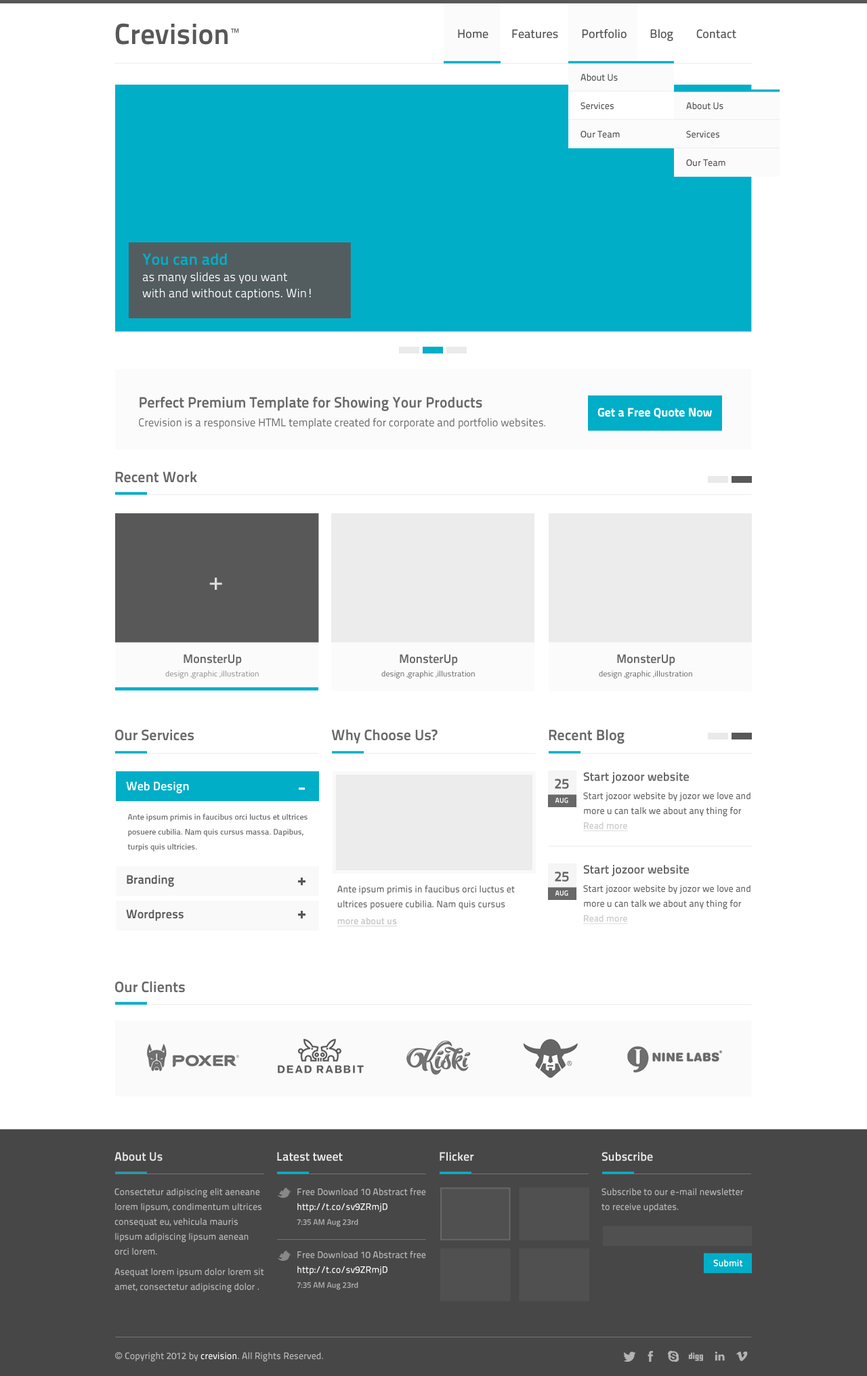
<style>
.page{position:relative;width:867px;height:1376px;background:#ffffff}
.page>*{position:absolute;margin:0}
.t1{font:12.2px "TitilliumText22L-Medium";color:#585858}
.t2{font:9.5px "TitilliumText22L-Medium";color:#585858}
.t3{font:12.2px/16.3px "TitilliumText22L-Regular";color:#ffffff}
.t4{font:16.3px/16.3px "TitilliumText22L-Bold";color:#00aec8}
.t5{font:11.3px/18.8px "TitilliumText22L-Regular";color:#686868}
.t6{font:15px/25.2px "TitilliumText22L-Bold";color:#686868}
.t7{font:12.2px "TitilliumText22L-XBold";color:#ffffff}
.t8{font:14.9px "TitilliumText22L-Bold";color:#686868}
.t9{font:24.4px "TitilliumText22L-Medium";color:#dedede}
.t10{font:12.2px "TitilliumText22L-Bold";color:#686868}
.t11{font:8.1px "TitilliumText22L-Regular";color:#8f8f8f}
.t12{font:8.1px "TitilliumText22L-Regular";color:#686868}
.t13{font:12.2px "TitilliumText22L-Bold";color:#ffffff}
.t14{font:9.5px/14.9px "TitilliumText22L-Medium";color:#686868}
.t15{font:9.5px/14.9px "TitilliumText22L-Bold";color:#cfcfcf;text-decoration:underline}
.t16{font:8.1px/14.9px "TitilliumText22L-Medium";color:#686868}
.t17{font:12.2px "TitilliumText22L-Bold";color:#585858}
.t18{font:9.5px/16.9px "TitilliumText22L-Bold";color:#c8c8c8;text-decoration:underline}
.t19{font:12.2px "TitilliumText22L-Bold";color:#e8e8e8}
.t20{font:9.5px/14.9px "TitilliumText22L-Medium";color:#b9b9b9}
.t21{font:9.5px/14.9px "TitilliumText22L-Medium";color:#fafafa}
.t22{font:8.1px/14.9px "TitilliumText22L-Medium";color:#b9b9b9}
.t23{font:9.5px "TitilliumText22L-Bold";color:#ffffff}
.t24{font:9.5px "TitilliumText22L-Medium";color:#b9b9b9}
.t25{font:9.5px "ArialMT";color:#b9b9b9}
.t26{font:9.5px "TitilliumText22L-Medium";color:#fafafa}
</style>
<div class="page">
<p class="t1" style="left:458px;top:29px;width:278px;height:12px">Home        Features        Portfolio        Blog        Contact</p>
<p class="t2" style="left:580px;top:74px;width:38px;height:7px">About Us</p>
<p class="t2" style="left:580px;top:102px;width:33px;height:8px">Services</p>
<p class="t2" style="left:686px;top:102px;width:37px;height:8px">About Us</p>
<p class="t2" style="left:580px;top:131px;width:40px;height:7px">Our Team</p>
<p class="t2" style="left:686px;top:131px;width:33px;height:7px">Services</p>
<p class="t2" style="left:686px;top:159px;width:39px;height:8px">Our Team</p>
<p class="t3" style="left:142px;top:253px;width:169px;height:47px"><span class="t4">You can add<br></span>as many slides as you want<br>with and without captions. Win!</p>
<p class="t5" style="left:139px;top:397px;width:406px;height:32px"><span class="t6">Perfect Premium Template for Showing Your Products<br></span>Crevision is a responsive HTML template created for corporate and portfolio websites.</p>
<p class="t7" style="left:597px;top:408px;width:115px;height:10px">Get a Free Quote Now</p>
<p class="t8" style="left:115px;top:471px;width:82px;height:12px">Recent Work</p>
<p class="t9" style="left:209px;top:578px;width:13px;height:12px">+</p>
<p class="t10" style="left:183px;top:654px;width:59px;height:12px">MonsterUp</p>
<p class="t10" style="left:399px;top:654px;width:59px;height:12px">MonsterUp</p>
<p class="t10" style="left:617px;top:654px;width:58px;height:12px">MonsterUp</p>
<p class="t11" style="left:165px;top:670px;width:94px;height:8px">design ,graphic ,illustration</p>
<p class="t12" style="left:381px;top:670px;width:94px;height:8px">design ,graphic ,illustration</p>
<p class="t12" style="left:599px;top:670px;width:93px;height:8px">design ,graphic ,illustration</p>
<p class="t8" style="left:115px;top:729px;width:79px;height:12px">Our Services</p>
<p class="t8" style="left:331px;top:729px;width:106px;height:14px">Why Choose Us?</p>
<p class="t8" style="left:548px;top:729px;width:76px;height:15px">Recent Blog</p>
<p class="t10" style="left:583px;top:772px;width:106px;height:12px">Start jozoor website</p>
<p class="t13" style="left:126px;top:781px;width:63px;height:13px">Web Design</p>
<p class="t14" style="left:583px;top:792px;width:167px;height:39px">Start jozoor website by jozor we love and<br>more u can talk we about any thing for<br><span class="t15">Read more</span></p>
<p class="t16" style="left:127px;top:813px;width:180px;height:39px">Ante ipsum primis in faucibus orci luctus et ultrices posuere cubilia. Nam quis cursus massa. Dapibus, turpis quis ultricies.</p>
<p class="t10" style="left:583px;top:865px;width:106px;height:12px">Start jozoor website</p>
<p class="t17" style="left:127px;top:875px;width:47px;height:12px">Branding</p>
<p class="t14" style="left:337px;top:885px;width:178px;height:41px">Ante ipsum primis in faucibus orci luctus et ultrices posuere cubilia. Nam quis cursus <br><span class="t18">more about us</span></p>
<p class="t14" style="left:583px;top:885px;width:167px;height:39px">Start jozoor website by jozor we love and<br>more u can talk we about any thing for<br><span class="t15">Read more</span></p>
<p class="t17" style="left:126px;top:909px;width:57px;height:12px">Wordpress</p>
<p class="t8" style="left:115px;top:981px;width:70px;height:12px">Our Clients</p>
<p class="t19" style="left:114px;top:1152px;width:49px;height:9px">About Us</p>
<p class="t19" style="left:277px;top:1152px;width:66px;height:9px">Latest tweet</p>
<p class="t19" style="left:439px;top:1152px;width:35px;height:9px">Flicker</p>
<p class="t19" style="left:601px;top:1152px;width:52px;height:9px">Subscribe</p>
<p class="t20" style="left:114px;top:1188px;width:150px;height:105px">Consectetur adipiscing elit aeneane lorem lipsum, condimentum ultrices consequat eu, vehicula mauris lipsum adipiscing lipsum aenean orci lorem.<br><br>Asequat lorem ipsum dolor lorem sit amet, consectetur adipiscing dolor .</p>
<p class="t20" style="left:297px;top:1188px;width:129px;height:39px">Free Download 10 Abstract free<br><span class="t21">http://t.co/sv9ZRmjD <br></span><span class="t22">7:35 AM Aug 23rd</span></p>
<p class="t20" style="left:601px;top:1188px;width:142px;height:24px">Subscribe to our e-mail newsletter to receive updates.</p>
<p class="t20" style="left:297px;top:1251px;width:129px;height:39px">Free Download 10 Abstract free<br><span class="t21">http://t.co/sv9ZRmjD <br></span><span class="t22">7:35 AM Aug 23rd</span></p>
<p class="t23" style="left:713px;top:1259px;width:30px;height:8px">Submit</p>
<p class="t24" style="left:115px;top:1351px;width:208px;height:11px"><span class="t25">© </span>Copyright 2012 by <span class="t26">crevision</span>. All Rights Reserved.</p>
</div>
